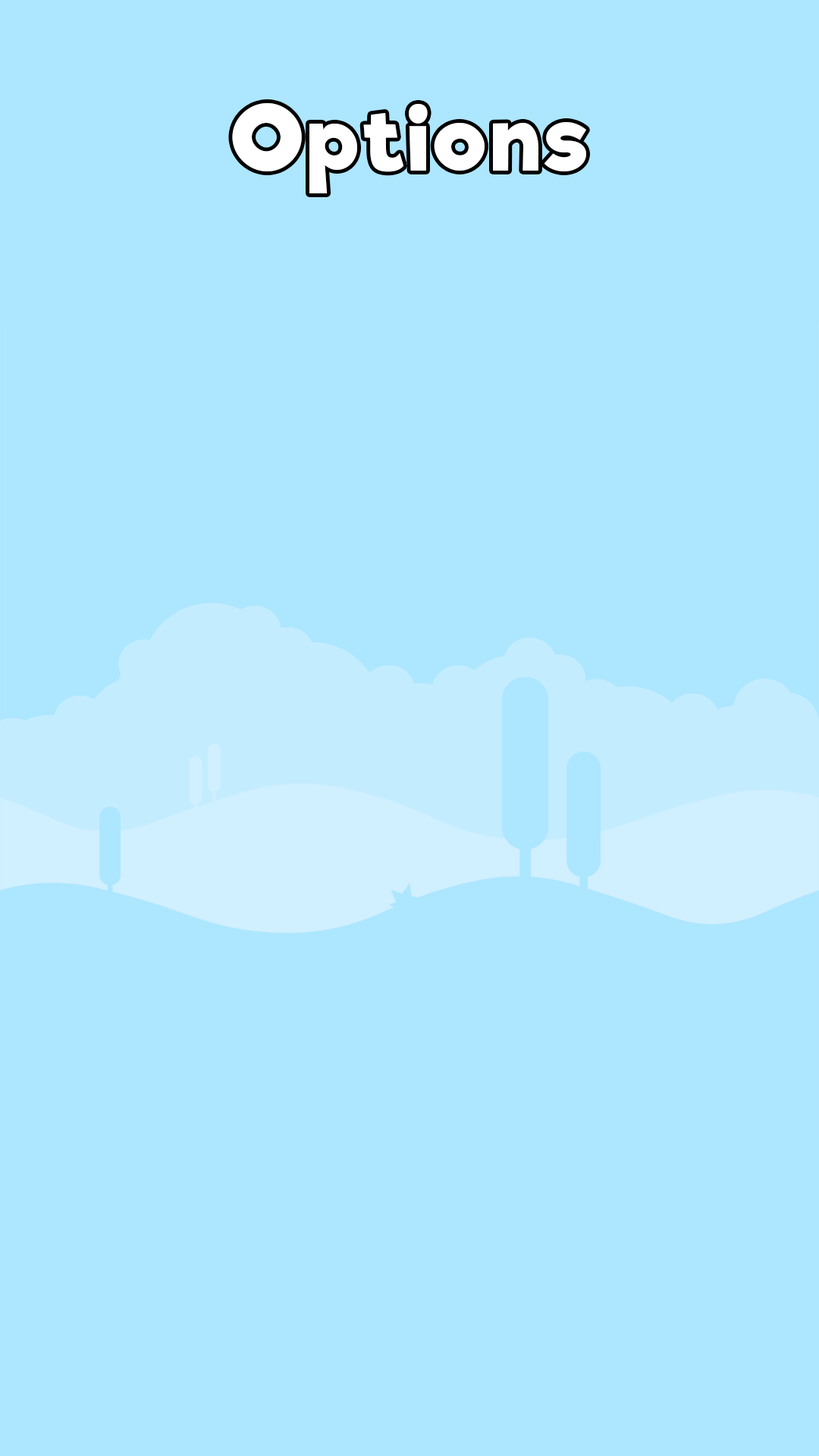
<style>
.page{position:relative;width:819px;height:1456px;background:#ade6ff}
.page>*{position:absolute;margin:0}
.t1{font:88.5px "Riffic-Bold";letter-spacing:0.05em;color:#ffffff}
</style>
<div class="page">
<p class="t1" style="left:232px;top:103px;width:354px;height:90px">Options</p>
</div>
